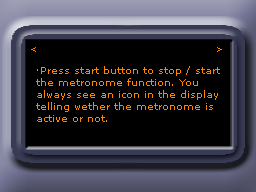
<style>
.page{position:relative;width:256px;height:192px;background:#000000}
.page>*{position:absolute;margin:0}
.t1{font:9px "MSReferenceSansSerif";color:#ff8400}
.t2{font:10px "MSReferenceSansSerif";color:#ff8400}
</style>
<div class="page">
<p class="t1" style="left:31px;top:47px;width:5px;height:5px">&lt;</p>
<p class="t1" style="left:217px;top:47px;width:5px;height:5px">&gt;</p>
<p class="t2" style="left:36px;top:66px;width:184px;height:56px">·Press start button to stop / start <br>the metronome function. You <br>always see an icon in the display <br>telling wether the metronome is <br>active or not.</p>
</div>
